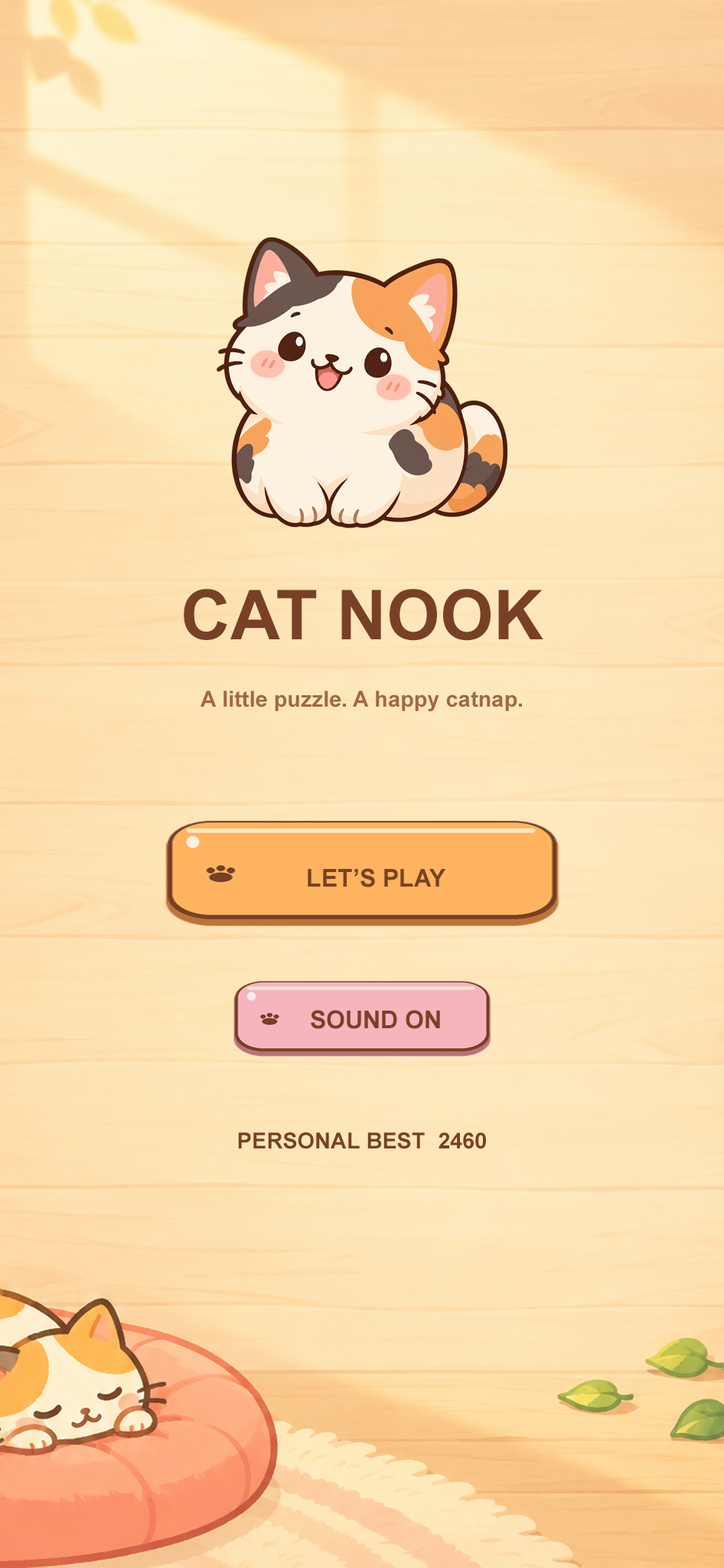
<style>
.page{position:relative;width:724px;height:1568px}
.page>*{position:absolute;margin:0}
.t1{font:68.9px "Arial-BoldMT";color:#784126}
.t2{font:22.2px "Arial-BoldMT";color:#a16843}
.t3{font:24.5px "Arial-BoldMT";color:#784126}
.t4{font:22.2px "Arial-BoldMT";color:#784126}
</style>
<div class="page">
<p class="t1" style="left:184px;top:589px;width:360px;height:52px">CAT NOOK</p>
<p class="t2" style="left:201px;top:691px;width:321px;height:20px">A little puzzle. A happy catnap.</p>
<p class="t3" style="left:308px;top:868px;width:138px;height:19px">LET’S PLAY</p>
<p class="t3" style="left:311px;top:1010px;width:129px;height:19px">SOUND ON</p>
<p class="t4" style="left:238px;top:1132px;width:248px;height:17px">PERSONAL BEST  2460</p>
</div>
